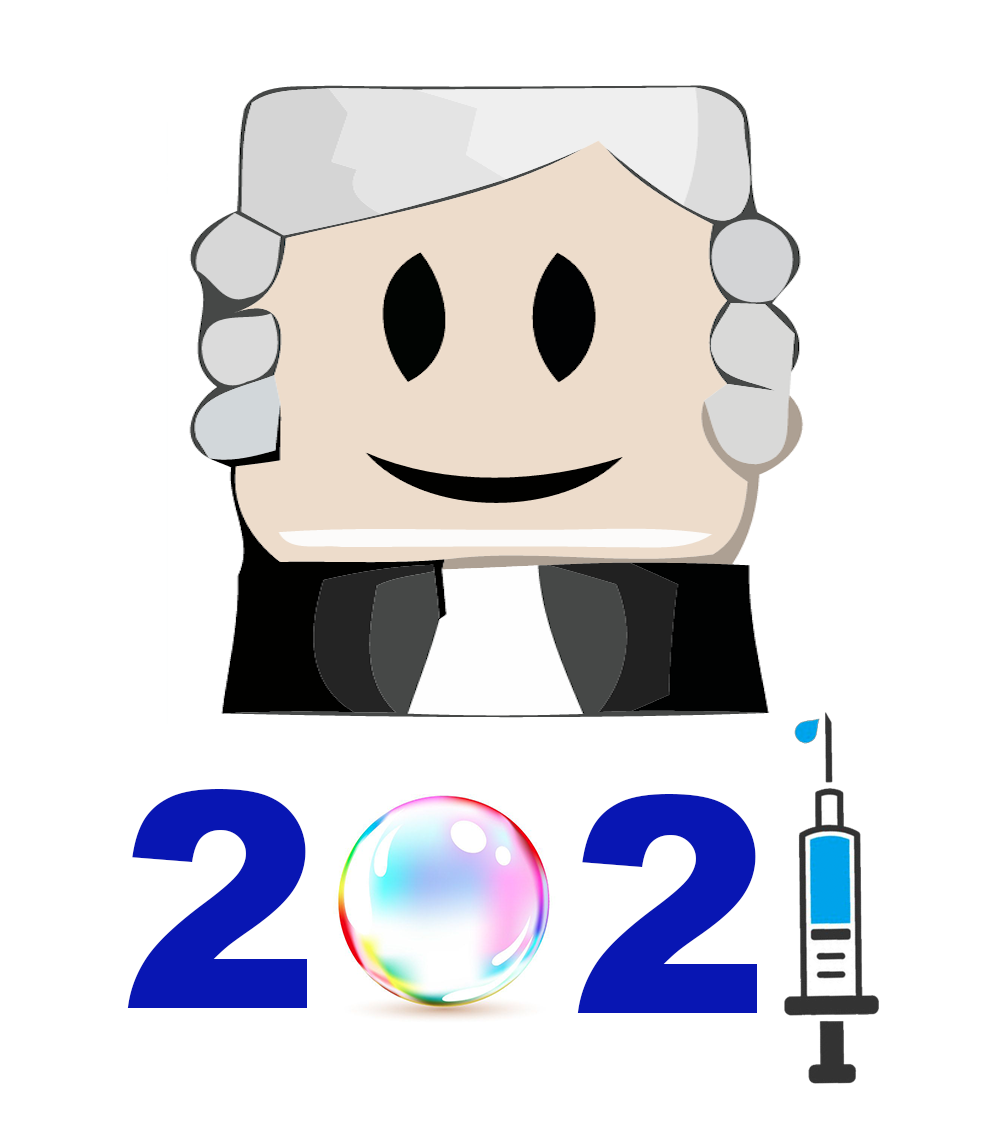
<style>
.page{position:relative;width:988px;height:1143px;background:#ffffff}
.page>*{position:absolute;margin:0}
.t1{font:300px "Arial-Black";color:#0816b3}
</style>
<div class="page">
<p class="t1" style="left:127px;top:789px;width:180px;height:219px">2</p>
<p class="t1" style="left:577px;top:794px;width:180px;height:219px">2</p>
</div>
